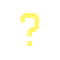
<style>
.page{position:relative;width:60px;height:60px;background:#ffffff}
.page>*{position:absolute;margin:0}
.t1{font:48px "College";color:#fff570}
</style>
<div class="page">
<p class="t1" style="left:20px;top:13px;width:20px;height:33px">?</p>
</div>
